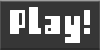
<style>
.page{position:relative;width:100px;height:50px;background:#363636}
.page>*{position:absolute;margin:0}
.t1{font:48px "Retro";color:#ffffff}
</style>
<div class="page">
<p class="t1" style="left:10px;top:7px;width:80px;height:36px">Play!</p>
</div>
